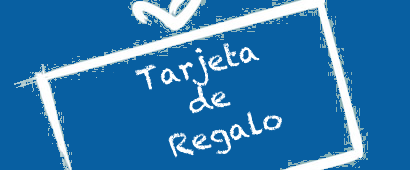
<style>
.page{position:relative;width:410px;height:170px;background:#085fa1}
.page>*{position:absolute;margin:0}
.t1{font:30px "Chalkduster";color:#ffffff}
</style>
<div class="page">
<p class="t1" style="left:135px;top:43px;width:147px;height:115px;text-align:center;rotate:-15deg">Tarjeta <br>de <br>Regalo</p>
</div>
